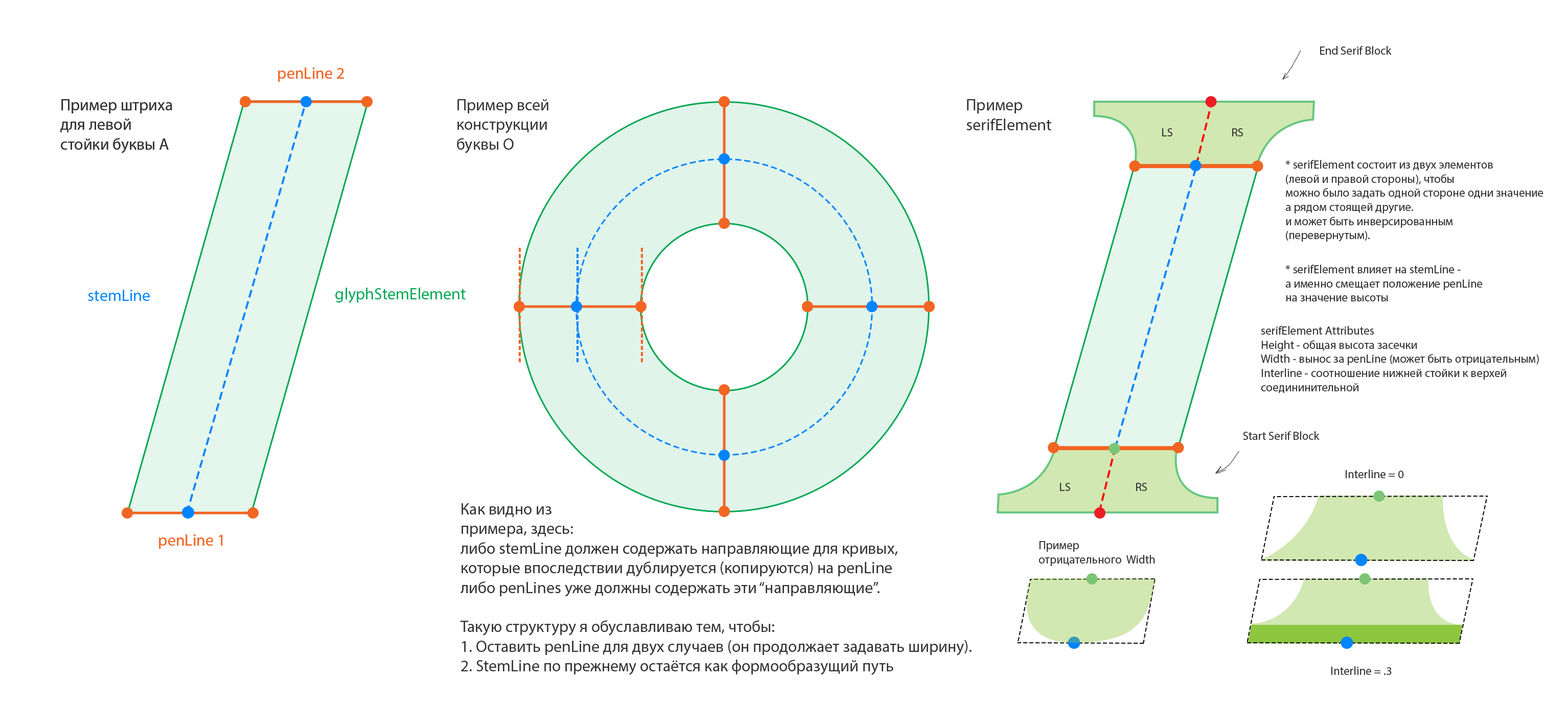
<style>
.page{position:relative;width:1568px;height:726px;background:#ffffff}
.page>*{position:absolute;margin:0}
.t1{font:11.8px "MyriadPro-Regular";color:#323232}
.t2{font:16.4px "MyriadPro-Regular";color:#f26522}
.t3{font:16.4px "MyriadPro-Regular";color:#323232}
.t4{font:16.4px "MyriadPro-Regular";color:#0084ff}
.t5{font:16.4px "MyriadPro-Regular";color:#00a651}
</style>
<div class="page">
<p class="t1" style="left:1320px;top:46px;width:72px;height:9px">End Serif Block</p>
<p class="t2" style="left:278px;top:67px;width:66px;height:15px">penLine 2</p>
<p class="t3" style="left:60px;top:99px;width:112px;height:54px">Пример штриха <br>для левой <br>стойки буквы А</p>
<p class="t3" style="left:457px;top:99px;width:91px;height:54px">Пример всей <br>конструкции<br>буквы О</p>
<p class="t3" style="left:966px;top:99px;width:85px;height:31px">Пример <br>serifElement</p>
<p class="t1" style="left:1162px;top:128px;width:10px;height:8px">LS</p>
<p class="t1" style="left:1232px;top:128px;width:11px;height:8px">RS</p>
<p class="t1" style="left:1285px;top:160px;width:258px;height:82px">* serifElement состоит из двух элементов<br>(левой и правой стороны), чтобы<br>можно было задать одной стороне одни значение<br>а рядом стоящей другие.<br>и может быть инверсированным<br>(перевернутым).</p>
<p class="t1" style="left:1285px;top:265px;width:198px;height:37px">* serifElement влияет на stemLine - <br>а именно смещает положение penLine<br>на значение высоты</p>
<p class="t4" style="left:88px;top:290px;width:62px;height:11px">stemLine</p>
<p class="t5" style="left:335px;top:288px;width:131px;height:15px">glyphStemElement</p>
<p class="t1" style="left:1261px;top:326px;width:278px;height:68px">serifElement Attributes<br>Height - общая высота засечки<br>Width - вынос за penLine (может быть отрицательным) <br>Interline - соотношение нижней стойки к верхей <br>соедининительной</p>
<p class="t1" style="left:1243px;top:431px;width:77px;height:9px">Start Serif Block</p>
<p class="t1" style="left:1345px;top:470px;width:59px;height:8px">Interline = 0</p>
<p class="t1" style="left:1060px;top:483px;width:10px;height:8px">LS</p>
<p class="t1" style="left:1136px;top:483px;width:11px;height:8px">RS</p>
<p class="t3" style="left:460px;top:503px;width:512px;height:172px">Как видно из<br>примера, здесь:<br>либо stemLine должен содержать направляющие для кривых, <br>которые впоследствии дублируется (копируются) на penLine<br>либо penLines уже должны содержать эти “направляющие”.<br><br>Такую структуру я обуславливаю тем, чтобы:<br>1. Оставить penLine для двух случаев (он продолжает задавать ширину).<br>2. StemLine по прежнему остаётся как формообразущий путь</p>
<p class="t2" style="left:159px;top:535px;width:64px;height:14px">penLine 1</p>
<p class="t1" style="left:1039px;top:541px;width:116px;height:25px">Пример  <br>отрицательного  Width</p>
<p class="t1" style="left:1331px;top:666px;width:61px;height:9px">Interline = .3</p>
</div>
